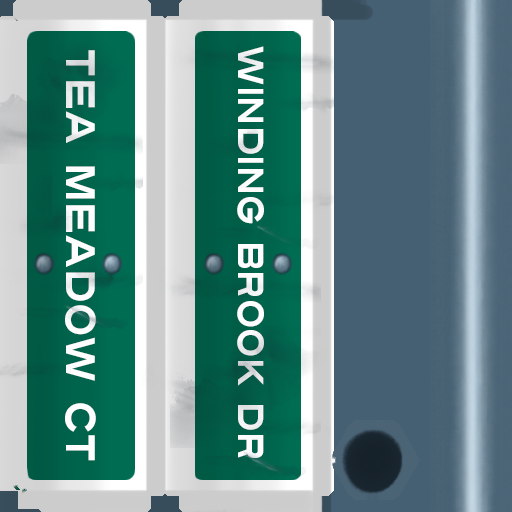
<style>
.page{position:relative;width:512px;height:512px}
.page>*{position:absolute;margin:0}
.t1{font:41px "Turnpike";color:#fefeff;scale:0.75 1}
.t2{font:36px "Turnpike";color:#fefeff;scale:0.75 1}
</style>
<div class="page">
<p class="t1" style="left:65px;top:50px;width:31px;height:411px;rotate:90deg">Tea meadow CT</p>
<p class="t2" style="left:237px;top:46px;width:27px;height:412px;rotate:90deg">Winding Brook Dr</p>
</div>
